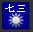
<style>
.page{position:relative;width:33px;height:32px;background:#000090}
.page>*{position:absolute;margin:0}
.t1{font:10.4px "SimSun";color:#ffffff}
</style>
<div class="page">
<p class="t1" style="left:5px;top:4px;width:20px;height:8px">七三</p>
</div>
